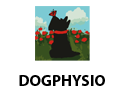
<style>
.page{position:relative;width:124px;height:103px;background:#ffffff}
.page>*{position:absolute;margin:0}
.t1{font:16px "MyriadPro-Bold";color:#000000}
</style>
<div class="page">
<p class="t1" style="left:19px;top:75px;width:86px;height:11px">DOGPHYSIO</p>
</div>
